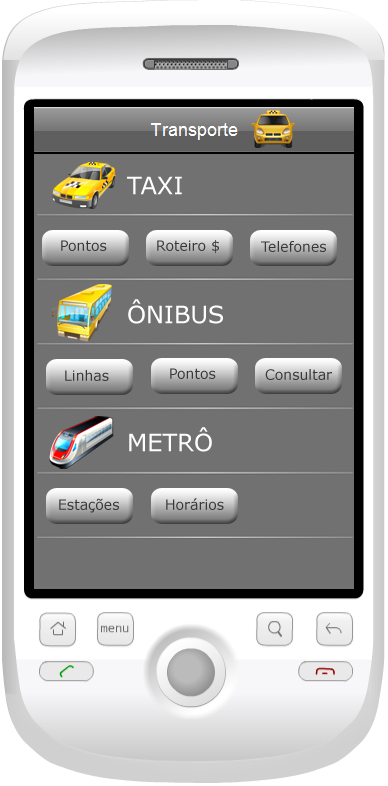
<style>
.page{position:relative;width:388px;height:786px;background:#717171}
.page>*{position:absolute;margin:0}
.t1{font:24px "Verdana";color:#ffffff}
.t2{font:14px "Verdana";color:#383838}
</style>
<div class="page">
<p class="t1" style="left:127px;top:176px;width:55px;height:19px">TAXI</p>
<p class="t2" style="left:61px;top:240px;width:46px;height:11px">Pontos</p>
<p class="t2" style="left:157px;top:240px;width:62px;height:14px">Roteiro $</p>
<p class="t2" style="left:261px;top:241px;width:65px;height:11px">Telefones</p>
<p class="t1" style="left:128px;top:299px;width:95px;height:25px">ÔNIBUS</p>
<p class="t2" style="left:65px;top:370px;width:44px;height:11px">Linhas</p>
<p class="t2" style="left:170px;top:368px;width:46px;height:11px">Pontos</p>
<p class="t2" style="left:265px;top:369px;width:67px;height:11px">Consultar</p>
<p class="t1" style="left:129px;top:427px;width:83px;height:25px">METRÔ</p>
<p class="t2" style="left:59px;top:498px;width:60px;height:15px">Estações</p>
<p class="t2" style="left:166px;top:498px;width:58px;height:12px">Horários</p>
</div>
